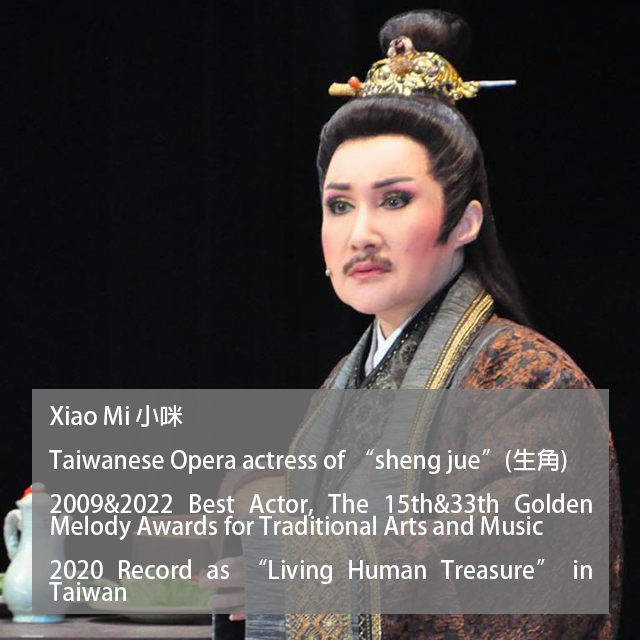
<style>
.page{position:relative;width:640px;height:640px}
.page>*{position:absolute;margin:0}
.t1{font:24px/22px "AdobeFanHeitiStd-Bold";color:#ffffff}
</style>
<div class="page">
<p class="t1" style="left:49px;top:404px;width:543px;height:197px;text-align:justify">Xiao Mi 小咪<br><br>Taiwanese Opera actress of “sheng jue”(生角)<br><br>2009&amp;2022 Best Actor, The 15th&amp;33th Golden Melody Awards for Traditional Arts and Music <br><br>2020 Record as “Living Human Treasure” in Taiwan</p>
</div>
